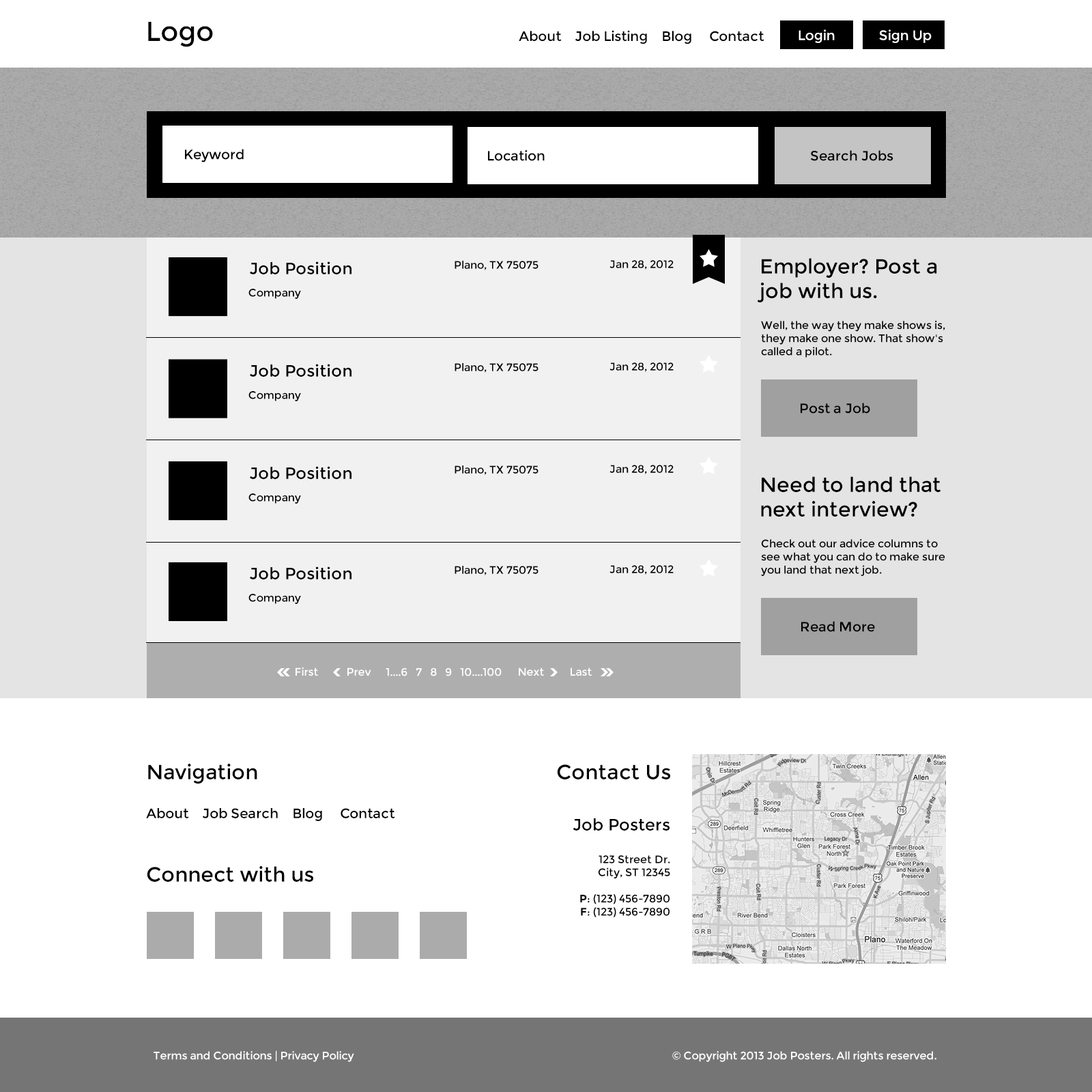
<style>
.page{position:relative;width:1092px;height:1092px;background:#ffffff}
.page>*{position:absolute;margin:0}
.t1{font:27.3px "Montserrat-Regular";color:#000000}
.t2{font:13.6px "Montserrat-Regular";color:#ffffff}
.t3{font:13.6px "Montserrat-Regular";color:#000000}
.t4{font:20.5px "Montserrat-Regular";color:#000000}
.t5{font:16.4px "Montserrat-Regular";color:#000000}
.t6{font:10.9px "Montserrat-Regular";color:#000000}
.t7{font:10.9px "Montserrat-Regular";color:#ffffff}
.t8{font:10.9px "Montserrat-Bold";color:#000000}
</style>
<div class="page">
<p class="t1" style="left:148px;top:22px;width:65px;height:25px">Logo</p>
<p class="t2" style="left:799px;top:29px;width:36px;height:14px">Login</p>
<p class="t2" style="left:879px;top:29px;width:53px;height:14px">Sign Up</p>
<p class="t3" style="left:519px;top:30px;width:245px;height:14px">About    Job Listing    Blog     Contact</p>
<p class="t3" style="left:185px;top:149px;width:59px;height:13px">Keyword</p>
<p class="t3" style="left:488px;top:150px;width:57px;height:11px">Location</p>
<p class="t3" style="left:810px;top:150px;width:83px;height:11px">Search Jobs</p>
<p class="t4" style="left:757px;top:258px;width:180px;height:44px">Employer? Post a<br>job with us.</p>
<p class="t5" style="left:250px;top:261px;width:101px;height:13px">Job Position</p>
<p class="t6" style="left:455px;top:261px;width:83px;height:9px">Plano, TX 75075</p>
<p class="t6" style="left:609px;top:260px;width:65px;height:10px">Jan 28, 2012</p>
<p class="t6" style="left:248px;top:289px;width:53px;height:10px">Company</p>
<p class="t6" style="left:761px;top:320px;width:184px;height:38px">Well, the way they make shows is, they make one show. That show's called a pilot.</p>
<p class="t5" style="left:250px;top:364px;width:101px;height:13px">Job Position</p>
<p class="t6" style="left:455px;top:363px;width:83px;height:10px">Plano, TX 75075</p>
<p class="t6" style="left:609px;top:362px;width:65px;height:10px">Jan 28, 2012</p>
<p class="t6" style="left:248px;top:391px;width:53px;height:10px">Company</p>
<p class="t3" style="left:801px;top:403px;width:69px;height:11px">Post a Job</p>
<p class="t5" style="left:250px;top:466px;width:101px;height:13px">Job Position</p>
<p class="t6" style="left:455px;top:465px;width:83px;height:10px">Plano, TX 75075</p>
<p class="t6" style="left:609px;top:465px;width:65px;height:9px">Jan 28, 2012</p>
<p class="t4" style="left:761px;top:476px;width:180px;height:41px">Need to land that<br>next interview?</p>
<p class="t6" style="left:248px;top:493px;width:53px;height:11px">Company</p>
<p class="t6" style="left:761px;top:538px;width:184px;height:38px">Check out our advice columns to see what you can do to make sure you land that next job.</p>
<p class="t5" style="left:250px;top:566px;width:101px;height:13px">Job Position</p>
<p class="t6" style="left:455px;top:566px;width:83px;height:9px">Plano, TX 75075</p>
<p class="t6" style="left:609px;top:565px;width:65px;height:10px">Jan 28, 2012</p>
<p class="t6" style="left:248px;top:594px;width:53px;height:10px">Company</p>
<p class="t3" style="left:801px;top:621px;width:74px;height:11px">Read More</p>
<p class="t7" style="left:296px;top:667px;width:22px;height:9px">First</p>
<p class="t7" style="left:347px;top:667px;width:24px;height:9px">Prev</p>
<p class="t7" style="left:386px;top:667px;width:116px;height:9px">1....6   7   8   9   10....100</p>
<p class="t7" style="left:519px;top:667px;width:25px;height:9px">Next</p>
<p class="t7" style="left:571px;top:667px;width:21px;height:9px">Last</p>
<p class="t4" style="left:148px;top:764px;width:109px;height:20px">Navigation</p>
<p class="t4" style="left:557px;top:764px;width:113px;height:15px">Contact Us</p>
<p class="t3" style="left:146px;top:808px;width:249px;height:13px">About    Job Search    Blog     Contact</p>
<p class="t6" style="left:573px;top:818px;width:97px;height:99px;text-align:right"><span class="t5">Job Posters<br><br></span>123 Street Dr.<br>City, ST 12345<br><br><span class="t8">P</span>: (123) 456-7890<br><span class="t8">F</span>: (123) 456-7890</p>
<p class="t4" style="left:147px;top:866px;width:166px;height:16px">Connect with us</p>
<p class="t7" style="left:154px;top:1050px;width:200px;height:12px">Terms and Conditions | Privacy Policy</p>
<p class="t7" style="left:672px;top:1051px;width:264px;height:11px">© Copyright 2013 Job Posters. All rights reserved.</p>
</div>
